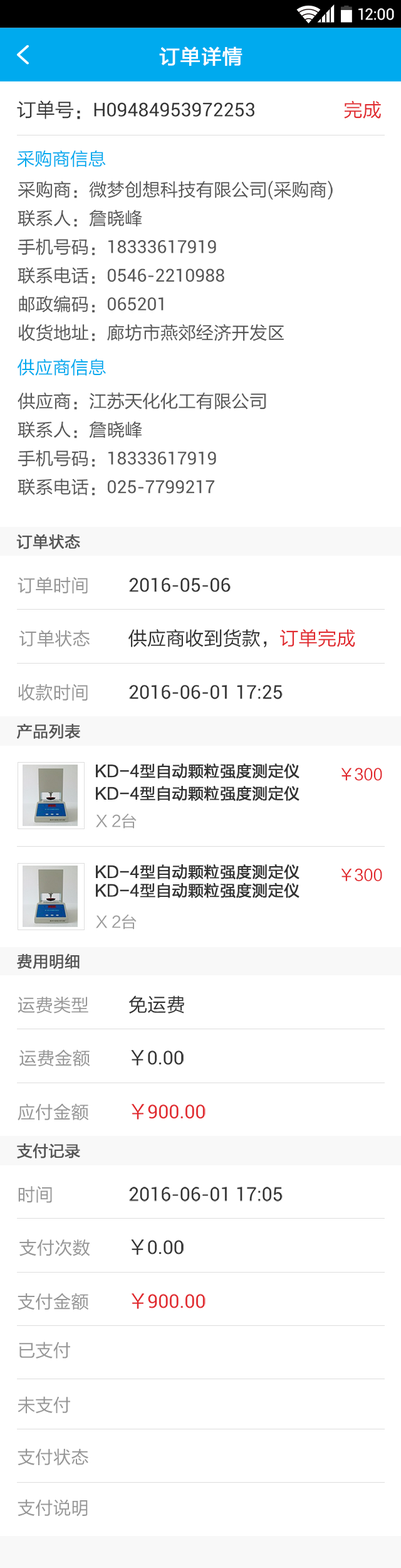
<style>
.page{position:relative;width:401px;height:1568px;background:#ffffff}
.page>*{position:absolute;margin:0}
.t1{font:15.6px "Roboto-Regular";color:#ffffff}
.t2{font:20.1px "FZLTHJW--GB1-0";letter-spacing:0.02em;color:#ffffff;font-weight:bold}
.t3{font:19px "Roboto-Regular";color:#333333}
.t4{font:19px "FZLTHJW--GB1-0";color:#333333}
.t5{font:19px "FZLTHJW--GB1-0";color:#e1292e}
.t6{font:17.8px "FZLTHJW--GB1-0";color:#00aaee}
.t7{font:17.8px/28.6px "FZLTHJW--GB1-0";color:#555555}
.t8{font:17.8px/28.6px "Roboto-Regular";color:#555555}
.t9{font:15.6px "FZLTHJW--GB1-0";color:#555555;font-weight:bold}
.t10{font:17.8px "FZLTHJW--GB1-0";color:#969696}
.t11{font:15.6px/22.3px "FZLTHJW--GB1-0";color:#333333;font-weight:bold}
.t12{font:15.6px "FZLTHJW--GB1-0";color:#e1292e}
.t13{font:15.6px "FZLTHJW--GB1-0";color:#9b9b9b}
.t14{font:15.6px "FZLTHJW--GB1-0";color:#333333;font-weight:bold}
.t15{font:19px "Roboto-Regular";color:#e1292e}
</style>
<div class="page">
<p class="t1" style="left:359px;top:8px;width:36px;height:12px">12:00</p>
<p class="t2" style="left:159px;top:46px;width:84px;height:20px">订单详情</p>
<p class="t3" style="left:17px;top:100px;width:238px;height:19px"><span class="t4">订单号：</span>H09484953972253</p>
<p class="t5" style="left:344px;top:100px;width:37px;height:19px">完成</p>
<p class="t6" style="left:17px;top:150px;width:89px;height:17px">采购商信息</p>
<p class="t7" style="left:18px;top:181px;width:315px;height:160px">采购商：微梦创想科技有限公司(采购商)<br>联系人：詹晓峰<br>手机号码：<span class="t8">18333617919<br></span>联系电话：<span class="t8">0546-2210988<br></span>邮政编码：<span class="t8">065201<br></span>收货地址：廊坊市燕郊经济开发区</p>
<p class="t6" style="left:18px;top:359px;width:88px;height:17px">供应商信息</p>
<p class="t7" style="left:18px;top:392px;width:249px;height:103px">供应商：江苏天化化工有限公司<br>联系人：詹晓峰<br>手机号码：<span class="t8">18333617919<br></span>联系电话：<span class="t8">025-7799217</span></p>
<p class="t9" style="left:16px;top:534px;width:64px;height:15px">订单状态</p>
<p class="t10" style="left:18px;top:577px;width:70px;height:17px">订单时间</p>
<p class="t3" style="left:129px;top:578px;width:102px;height:14px">2016-05-06</p>
<p class="t10" style="left:19px;top:630px;width:71px;height:17px">订单状态</p>
<p class="t4" style="left:129px;top:629px;width:227px;height:19px">供应商收到货款，<span class="t5">订单完成</span></p>
<p class="t10" style="left:18px;top:684px;width:70px;height:17px">收款时间</p>
<p class="t3" style="left:129px;top:685px;width:154px;height:14px">2016-06-01 17:25</p>
<p class="t9" style="left:17px;top:724px;width:63px;height:15px">产品列表</p>
<p class="t11" style="left:96px;top:763px;width:204px;height:38px">KD-4型自动颗粒强度测定仪<br>KD-4型自动颗粒强度测定仪</p>
<p class="t12" style="left:341px;top:768px;width:42px;height:13px">￥300</p>
<p class="t13" style="left:96px;top:813px;width:41px;height:16px">X 2台</p>
<p class="t14" style="left:96px;top:864px;width:204px;height:34px">KD-4型自动颗粒强度测定仪<br>KD-4型自动颗粒强度测定仪</p>
<p class="t12" style="left:341px;top:868px;width:42px;height:13px">￥300</p>
<p class="t13" style="left:96px;top:914px;width:41px;height:16px">X 2台</p>
<p class="t9" style="left:17px;top:953px;width:63px;height:16px">费用明细</p>
<p class="t10" style="left:18px;top:997px;width:70px;height:17px">运费类型</p>
<p class="t4" style="left:129px;top:995px;width:55px;height:19px">免运费</p>
<p class="t10" style="left:19px;top:1049px;width:71px;height:18px">运费金额</p>
<p class="t3" style="left:131px;top:1050px;width:53px;height:16px"><span class="t4">￥</span>0.00</p>
<p class="t10" style="left:18px;top:1103px;width:71px;height:18px">应付金额</p>
<p class="t15" style="left:131px;top:1104px;width:75px;height:16px"><span class="t5">￥</span>900.00</p>
<p class="t9" style="left:17px;top:1143px;width:63px;height:15px">支付记录</p>
<p class="t10" style="left:18px;top:1186px;width:34px;height:17px">时间</p>
<p class="t3" style="left:129px;top:1187px;width:154px;height:15px">2016-06-01 17:05</p>
<p class="t10" style="left:19px;top:1239px;width:71px;height:17px">支付次数</p>
<p class="t3" style="left:131px;top:1239px;width:53px;height:16px"><span class="t4">￥</span>0.00</p>
<p class="t10" style="left:18px;top:1293px;width:71px;height:17px">支付金额</p>
<p class="t15" style="left:131px;top:1293px;width:75px;height:16px"><span class="t5">￥</span>900.00</p>
<p class="t10" style="left:19px;top:1342px;width:51px;height:17px">已支付</p>
<p class="t10" style="left:18px;top:1396px;width:52px;height:18px">未支付</p>
<p class="t10" style="left:18px;top:1448px;width:70px;height:18px">支付状态</p>
<p class="t10" style="left:18px;top:1499px;width:70px;height:18px">支付说明</p>
</div>
